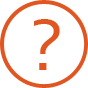
<style>
.page{position:relative;width:88px;height:88px;background:#ffffff}
.page>*{position:absolute;margin:0}
.t1{font:76px "Corbel";color:#e05520}
</style>
<div class="page">
<p class="t1" style="left:34px;top:19px;width:26px;height:51px">?</p>
</div>
